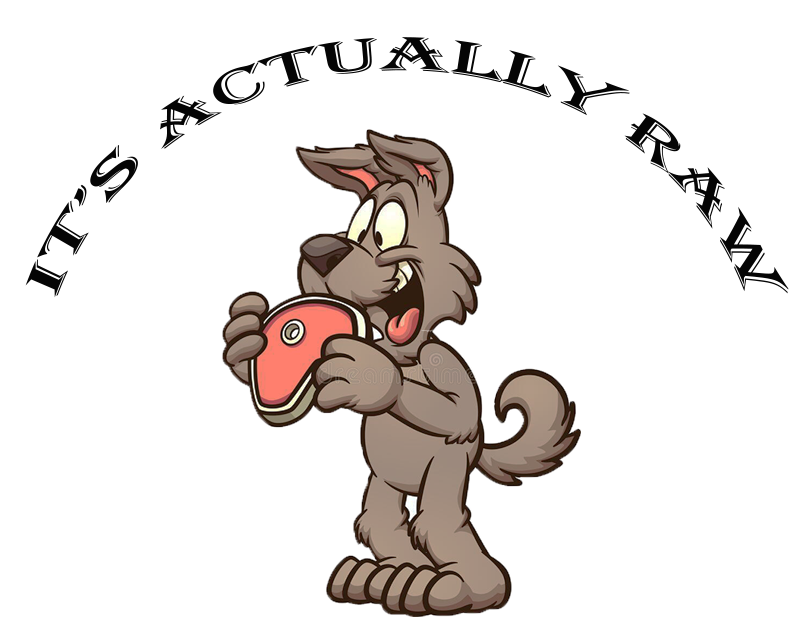
<style>
.page{position:relative;width:804px;height:617px;background:#ffffff}
.page>*{position:absolute;margin:0}
.t1{font:50px "Algerian";color:#050505}
</style>
<div class="page">
<p class="t1" style="left:25px;top:37px;width:764px;height:261px;text-align:center">It’s actually raw</p>
</div>
